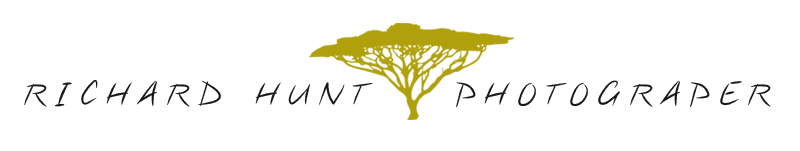
<style>
.page{position:relative;width:800px;height:151px;background:#ffffff}
.page>*{position:absolute;margin:0}
.t1{font:32px "Notethis";letter-spacing:0.3em;color:#1a171b}
</style>
<div class="page">
<p class="t1" style="left:24px;top:79px;width:747px;height:29px">RICHARD HUNT   PHOTOGRAPER</p>
</div>
